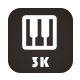
<style>
.page{position:relative;width:80px;height:80px;background:#ffffff}
.page>*{position:absolute;margin:0}
.t1{font:15px "Bauhaus93";color:#ffffff}
</style>
<div class="page">
<p class="t1" style="left:32px;top:57px;width:17px;height:11px">3K</p>
</div>
